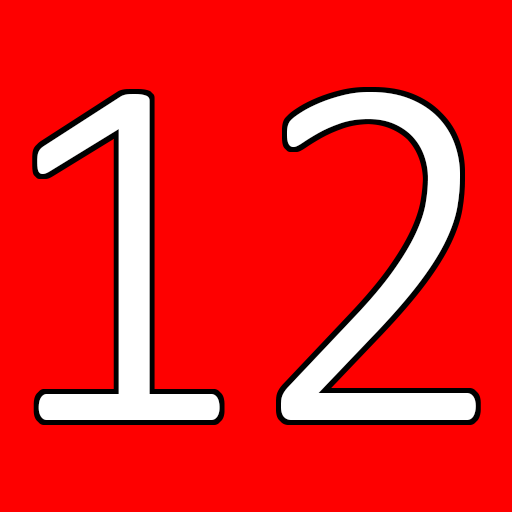
<style>
.page{position:relative;width:512px;height:512px;background:#fe0000}
.page>*{position:absolute;margin:0}
.t1{font:511.5px "Calibri-Light";color:#ffffff}
</style>
<div class="page">
<p class="t1" style="left:37px;top:92px;width:439px;height:328px">12</p>
</div>
